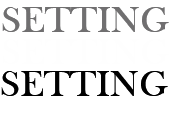
<style>
.page{position:relative;width:169px;height:128px;background:#ffffff}
.page>*{position:absolute;margin:0}
.t1{font:38px "BaskOldFace";color:#706f70}
.t2{font:38px "BaskOldFace";color:#000000}
</style>
<div class="page">
<p class="t1" style="left:2px;top:7px;width:167px;height:25px">SETTING</p>
<p class="t2" style="left:1px;top:71px;width:167px;height:25px">SETTING</p>
</div>
